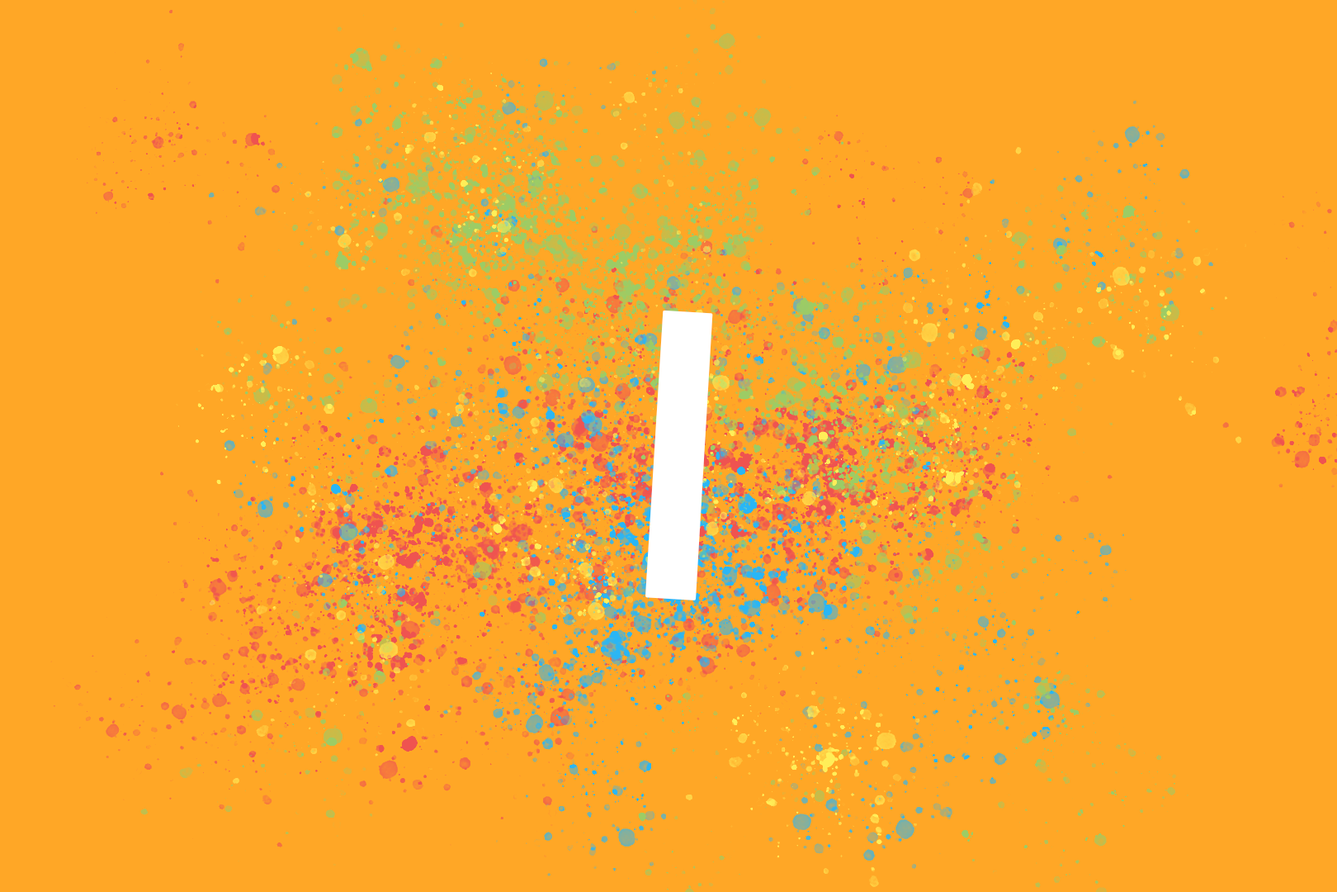
<style>
.page{position:relative;width:1337px;height:892px;background:#ffa726}
.page>*{position:absolute;margin:0}
.t1{font:412.8px "Staatliches-Regular";color:#ffffff}
</style>
<div class="page">
<p class="t1" style="left:646px;top:310px;width:67px;height:290px;rotate:3deg">I</p>
</div>
